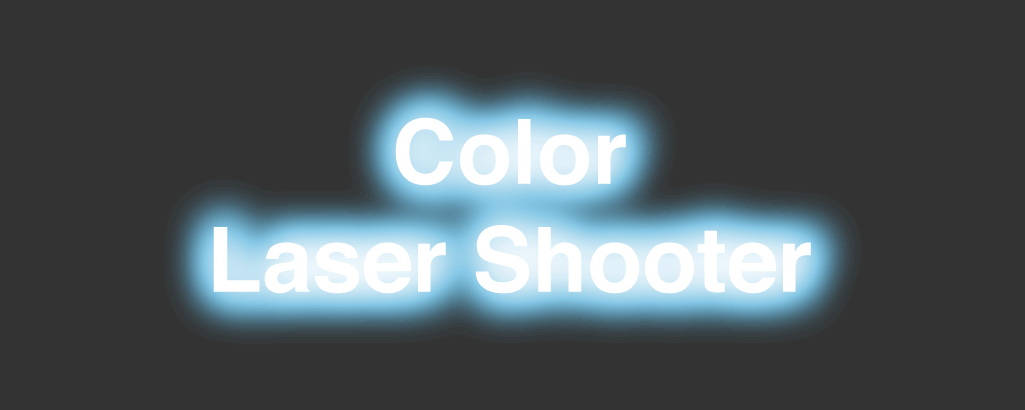
<style>
.page{position:relative;width:1025px;height:410px;background:#333333}
.page>*{position:absolute;margin:0}
.t1{font:90px "Helvetica-Bold";color:#ffffff}
</style>
<div class="page">
<p class="t1" style="left:213px;top:117px;width:598px;height:177px;text-align:center">Color<br>Laser Shooter</p>
</div>
